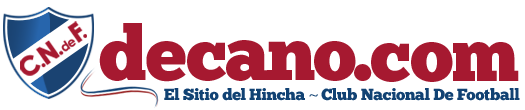
<style>
.page{position:relative;width:525px;height:110px;background:#ffffff}
.page>*{position:absolute;margin:0}
.t1{font:76.2px "ChunkFive";letter-spacing:-0.05em;color:#a61930}
.t2{font:16.1px "ChunkFive-Roman";letter-spacing:-0.02em;color:#114273}
.t3{font:16.1px "MyriadPro-Regular";letter-spacing:-0.02em;color:#114273}
</style>
<div class="page">
<p class="t1" style="left:99px;top:23px;width:47px;height:58px">d</p>
<p class="t1" style="left:146px;top:41px;width:40px;height:41px">e</p>
<p class="t1" style="left:226px;top:40px;width:43px;height:41px">a</p>
<p class="t1" style="left:268px;top:41px;width:47px;height:39px">n</p>
<p class="t1" style="left:314px;top:41px;width:42px;height:40px">o</p>
<p class="t1" style="left:187px;top:42px;width:39px;height:39px">c</p>
<p class="t1" style="left:371px;top:43px;width:39px;height:39px">c</p>
<p class="t1" style="left:411px;top:42px;width:42px;height:40px">o</p>
<p class="t1" style="left:453px;top:42px;width:66px;height:39px">m</p>
<p class="t1" style="left:354px;top:64px;width:18px;height:17px">.</p>
<p class="t2" style="left:164px;top:88px;width:356px;height:13px">El Sitio del Hincha <span class="t3">~ </span>Club Nacional De Football</p>
</div>
